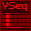
<style>
.page{position:relative;width:31px;height:31px;background:#320000}
.page>*{position:absolute;margin:0}
.t1{font:10px "rktr7rg";color:#ff0000}
</style>
<div class="page">
<p class="t1" style="left:2px;top:2px;width:25px;height:9px">VSeq</p>
</div>
